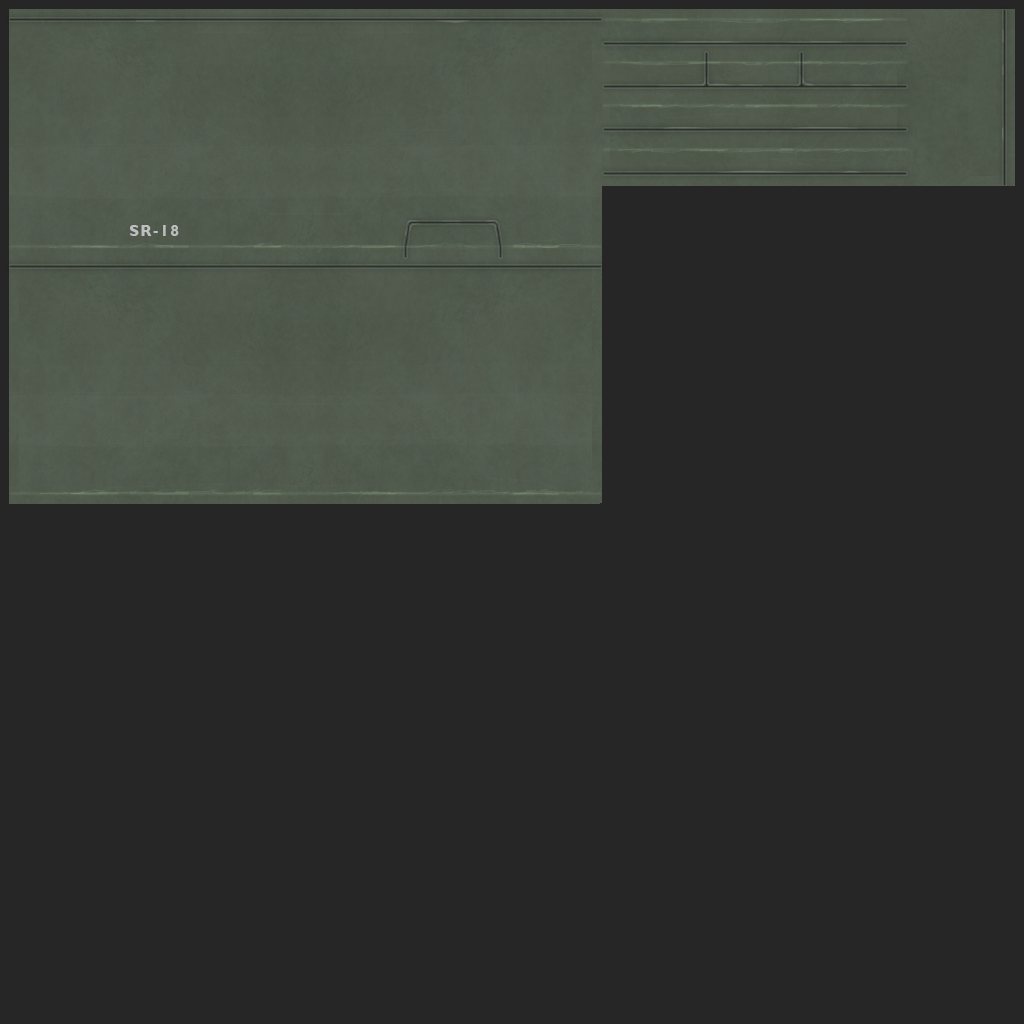
<style>
.page{position:relative;width:1024px;height:1024px;background:#262626}
.page>*{position:absolute;margin:0}
.t1{font:16px "GillSansMT-Bold";letter-spacing:0.1em;color:#bfbfbf}
</style>
<div class="page">
<p class="t1" style="left:130px;top:225px;width:49px;height:11px">SR-18</p>
</div>
